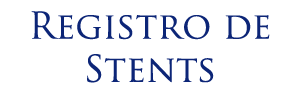
<style>
.page{position:relative;width:300px;height:100px;background:#ffffff}
.page>*{position:absolute;margin:0}
.t1{font:36px "TrajanPro-Regular";color:#0c2577}
</style>
<div class="page">
<p class="t1" style="left:31px;top:11px;width:239px;height:72px;text-align:center">Registro de Stents</p>
</div>
